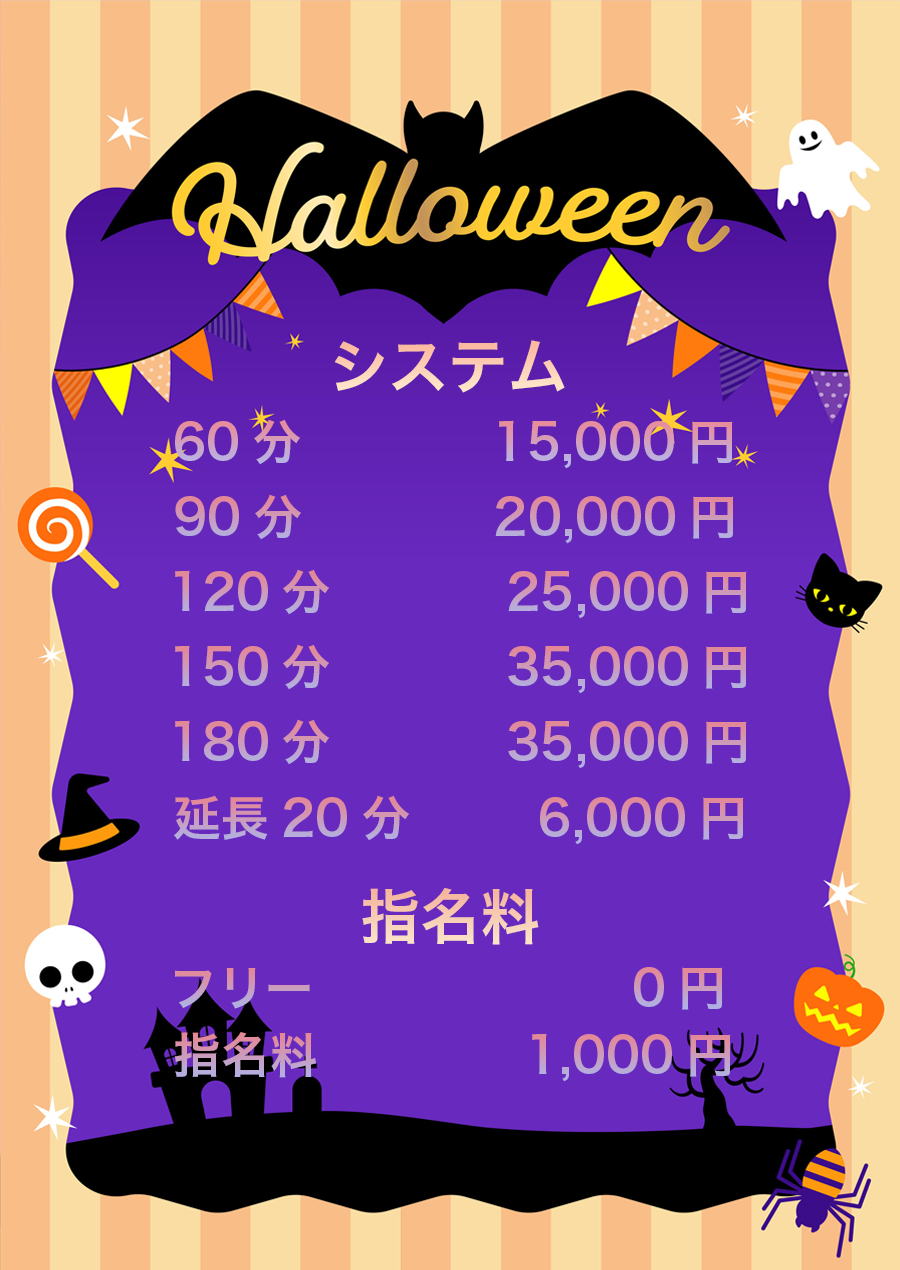
<style>
.page{position:relative;width:900px;height:1270px;background:#6829be}
.page>*{position:absolute;margin:0}
.t1{font:60px "HiraKakuPro-W6";color:#fdd1b7}
.t2{font:48px "HiraKakuPro-W6"}
.t3{font:60px "HiraKakuPro-W6";color:#f7cdb5}
</style>
<div class="page">
<p class="t1" style="left:334px;top:340px;width:231px;height:53px">システム</p>
<p class="t2" style="left:175px;top:419px;width:558px;height:50px">60分            15,000円</p>
<p class="t2" style="left:175px;top:494px;width:559px;height:50px">90分            20,000円</p>
<p class="t2" style="left:175px;top:569px;width:572px;height:50px">120分           25,000円</p>
<p class="t2" style="left:175px;top:644px;width:572px;height:50px">150分           35,000円</p>
<p class="t2" style="left:175px;top:719px;width:572px;height:50px">180分           35,000円</p>
<p class="t2" style="left:174px;top:795px;width:570px;height:50px">延長20分        6,000円</p>
<p class="t3" style="left:362px;top:888px;width:177px;height:57px">指名料</p>
<p class="t2" style="left:175px;top:967px;width:548px;height:43px">フリー                    0円</p>
<p class="t2" style="left:175px;top:1032px;width:556px;height:50px">指名料             1,000円</p>
</div>
